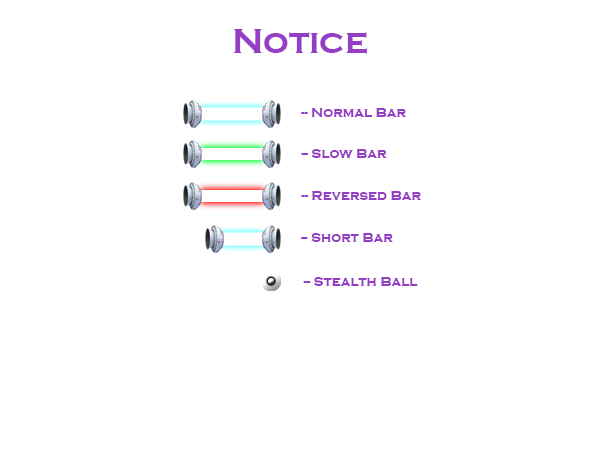
<style>
.page{position:relative;width:600px;height:450px;background:#ffffff}
.page>*{position:absolute;margin:0}
.t1{font:36px "CopperplateGothic-Bold";color:#933ec5}
.t2{font:14px "CopperplateGothic-Bold";color:#933ec5}
</style>
<div class="page">
<p class="t1" style="left:234px;top:29px;width:133px;height:25px">Notice</p>
<p class="t2" style="left:301px;top:108px;width:105px;height:9px">-- Normal Bar</p>
<p class="t2" style="left:301px;top:149px;width:86px;height:9px">-- Slow Bar</p>
<p class="t2" style="left:301px;top:191px;width:120px;height:9px">-- Reversed Bar</p>
<p class="t2" style="left:301px;top:233px;width:92px;height:9px">-- Short Bar</p>
<p class="t2" style="left:303px;top:277px;width:115px;height:9px">-- Stealth Ball</p>
</div>
